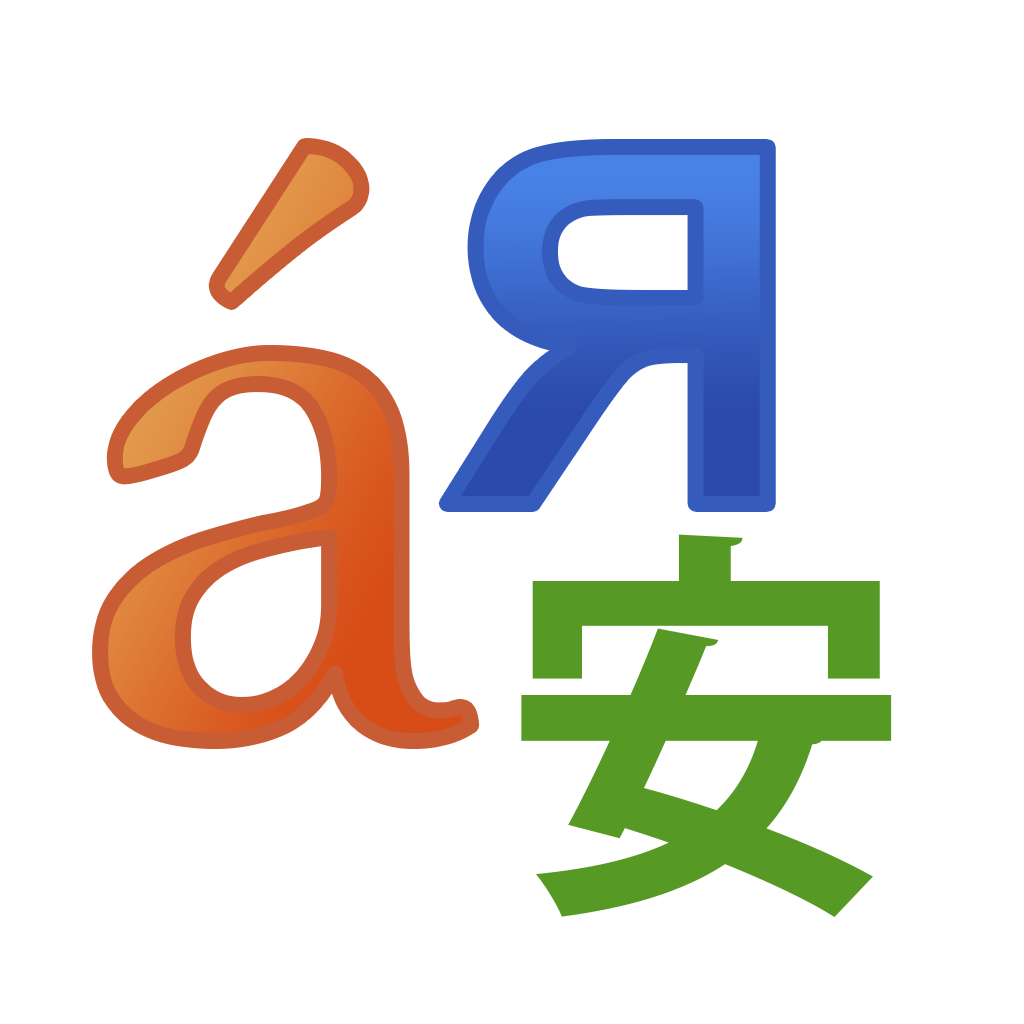
<style>
.page{position:relative;width:1024px;height:1024px;background:#ffffff}
.page>*{position:absolute;margin:0}
.t1{font:870.8px "Athelas-Regular";letter-spacing:-0.025em}
.t2{font:499.2px "Arial-BoldMT";letter-spacing:-0.025em;color:#355cbd}
.t3{font:404.2px "KozGoPr6N-Bold";letter-spacing:0.175em;color:#569924}
</style>
<div class="page">
<p class="t1" style="left:100px;top:146px;width:372px;height:595px">á</p>
<p class="t2" style="left:446px;top:147px;width:322px;height:357px;rotate:180deg">R</p>
<p class="t3" style="left:521px;top:534px;width:371px;height:383px">安</p>
</div>
